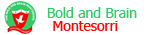
<style>
.page{position:relative;width:150px;height:35px;background:#ffffff}
.page>*{position:absolute;margin:0}
.t1{font:14px "Tahoma";color:#34ca66}
.t2{font:14px "Tahoma";color:#fb0101}
</style>
<div class="page">
<p class="t1" style="left:47px;top:7px;width:90px;height:11px">Bold and Brain</p>
<p class="t2" style="left:53px;top:21px;width:65px;height:10px">Montesorri</p>
</div>
